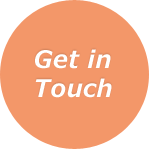
<style>
.page{position:relative;width:150px;height:150px;background:#f39769}
.page>*{position:absolute;margin:0}
.t1{font:24px "Meiryo-BoldItalic";letter-spacing:0.021em;color:#ffffff}
</style>
<div class="page">
<p class="t1" style="left:35px;top:49px;width:77px;height:49px">Get in Touch</p>
</div>
